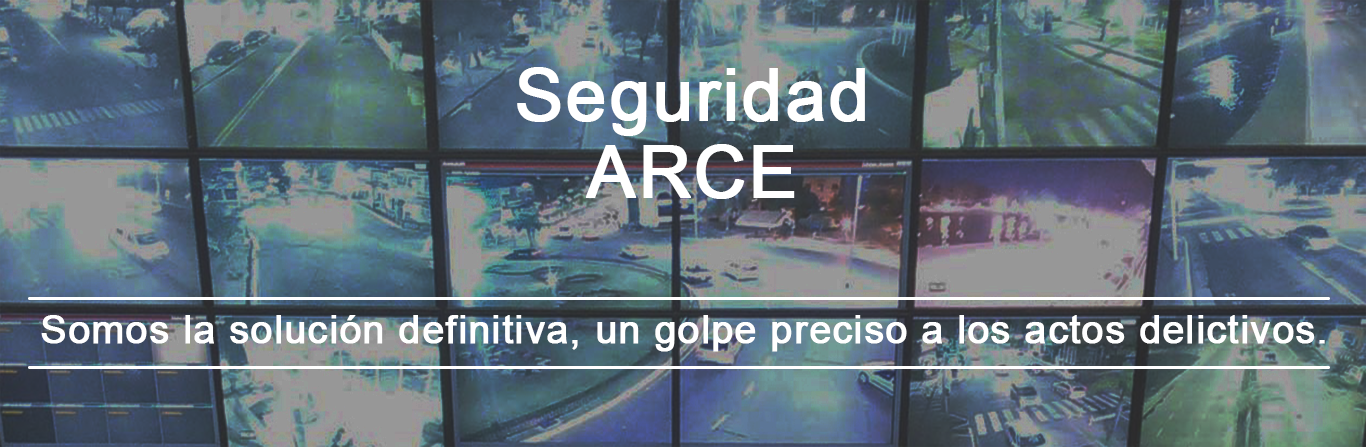
<style>
.page{position:relative;width:1366px;height:447px}
.page>*{position:absolute;margin:0}
.t1{font:72px/78px "ArialMT";letter-spacing:0.017em;color:#ffffff;font-weight:bold}
.t2{font:39px "ArialMT";letter-spacing:0.017em;color:#ffffff;font-weight:bold}
</style>
<div class="page">
<p class="t1" style="left:517px;top:67px;width:348px;height:132px;text-align:center">Seguridad<br>ARCE</p>
<p class="t2" style="left:41px;top:315px;width:1284px;height:37px">Somos la solución definitiva, un golpe preciso a los actos delictivos.</p>
</div>
